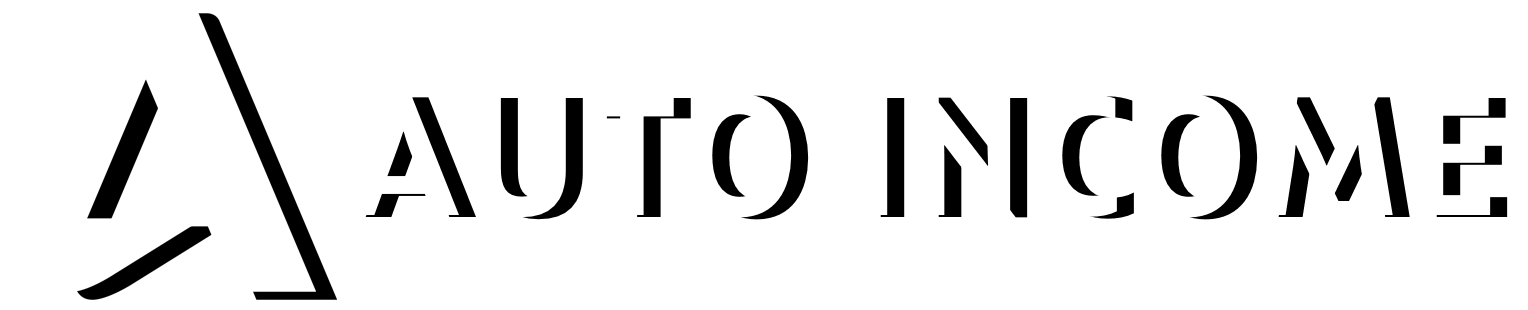
<style>
.page{position:relative;width:1528px;height:310px;background:#ffffff}
.page>*{position:absolute;margin:0}
.t1{font:170px "Squad-Trial-Bold";letter-spacing:0.05em;color:#ffffff}
.t2{font:170px "Squad-Trial-Bold";letter-spacing:0.05em}
</style>
<div class="page">
<p class="t1" style="left:348px;top:93px;width:1143px;height:125px">AUTO INCOME</p>
<p class="t2" style="left:365px;top:95px;width:1143px;height:125px">AUTO INCOME</p>
</div>
